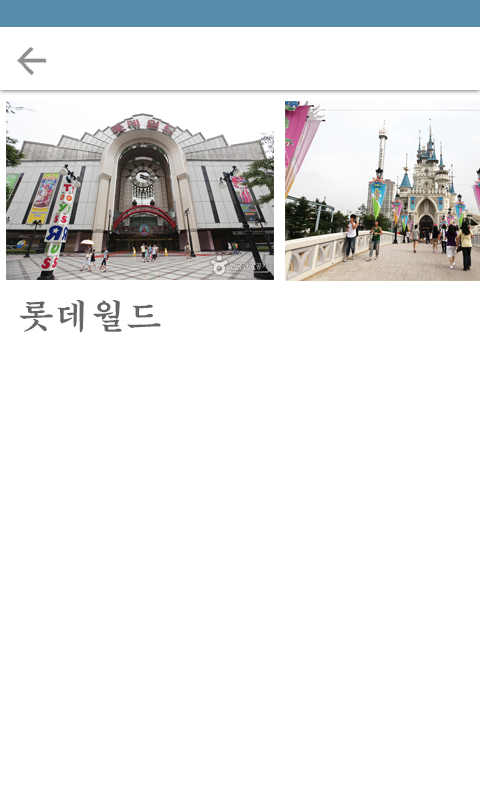
<style>
.page{position:relative;width:480px;height:800px;background:#ffffff}
.page>*{position:absolute;margin:0}
.t1{font:35.8px "MJemokBatang";color:#686466}
</style>
<div class="page">
<p class="t1" style="left:19px;top:300px;width:142px;height:33px">롯데월드</p>
</div>
